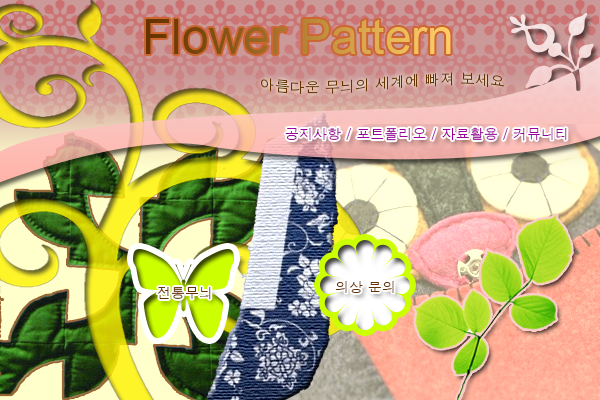
<style>
.page{position:relative;width:600px;height:400px}
.page>*{position:absolute;margin:0}
.t1{font:48.2px "ArialMT"}
.t2{font:14.9px "Dotum";color:#663300}
.t3{font:13.9px "Dotum";color:#990099}
.t4{font:13.9px "Dotum";color:#663300}
.t5{font:14px "Dotum";color:#663300}
</style>
<div class="page">
<p class="t1" style="left:146px;top:19px;width:305px;height:35px">Flower Pattern</p>
<p class="t2" style="left:261px;top:72px;width:244px;height:22px">아름다운 무늬의 세계에 빠져 보세요</p>
<p class="t3" style="left:285px;top:127px;width:282px;height:14px">공지사항 / 포트폴리오 / 자료활용 / 커뮤니티</p>
<p class="t4" style="left:335px;top:281px;width:59px;height:12px">의상 문의</p>
<p class="t5" style="left:157px;top:287px;width:54px;height:12px">전통무늬</p>
</div>
